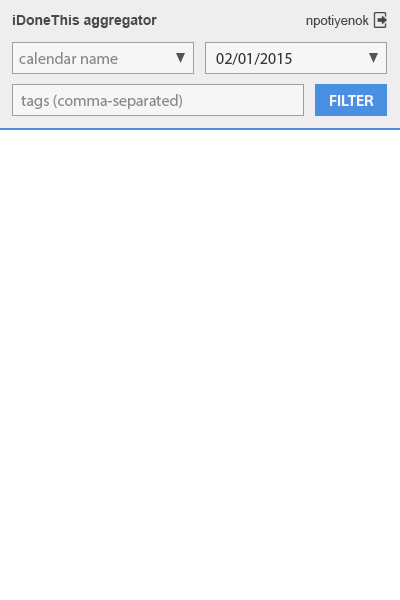
<style>
.page{position:relative;width:400px;height:600px;background:#ffffff}
.page>*{position:absolute;margin:0}
.t1{font:14px "Arial-BoldMT";color:#4a4a4a}
.t2{font:13px "ArialMT";color:#4a4a4a}
.t3{font:16px "MyriadPro-Regular";color:#8a8a8a}
.t4{font:16px "MyriadPro-Regular";color:#363636}
.t5{font:16px "MyriadPro-Semibold";color:#f6f6f6;text-transform:uppercase}
</style>
<div class="page">
<p class="t1" style="left:12px;top:15px;width:145px;height:13px">iDoneThis aggregator</p>
<p class="t2" style="left:306px;top:15px;width:63px;height:13px">npotiyenok</p>
<p class="t3" style="left:19px;top:52px;width:99px;height:12px">calendar name</p>
<p class="t4" style="left:216px;top:53px;width:76px;height:12px">02/01/2015</p>
<p class="t3" style="left:21px;top:94px;width:161px;height:15px">tags (comma-separated)</p>
<p class="t5" style="left:330px;top:95px;width:44px;height:11px">Filter</p>
</div>
